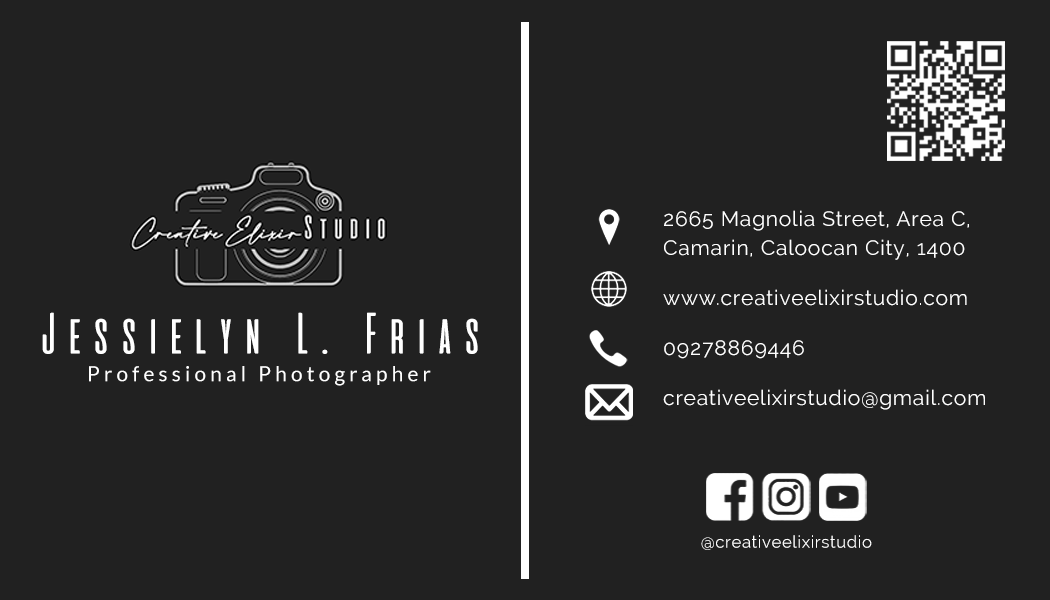
<style>
.page{position:relative;width:1050px;height:600px;background:#212121}
.page>*{position:absolute;margin:0}
.t1{font:20.8px/50px "Raleway";letter-spacing:0.04em;color:#ffffff}
.t2{font:20.8px/29.2px "Raleway";letter-spacing:0.04em;color:#ffffff}
.t3{font:58.2px "aliensandcows";letter-spacing:0.04em;color:#ffffff}
.t4{font:20.8px "Lato-Regular";letter-spacing:0.2em;color:#ffffff}
.t5{font:16.7px "Raleway";letter-spacing:0.04em;color:#ffffff}
</style>
<div class="page">
<p class="t1" style="left:663px;top:210px;width:322px;height:200px"><span class="t2">2665 Magnolia Street, Area C, <br>Camarin, Caloocan City, 1400<br></span>www.creativeelixirstudio.com<br>09278869446<br>creativeelixirstudio@gmail.com</p>
<p class="t3" style="left:42px;top:312px;width:436px;height:42px">Jessielyn L. Frias</p>
<p class="t4" style="left:89px;top:366px;width:342px;height:20px">Professional Photographer</p>
<p class="t5" style="left:701px;top:535px;width:171px;height:15px">@creativeelixirstudio</p>
</div>
